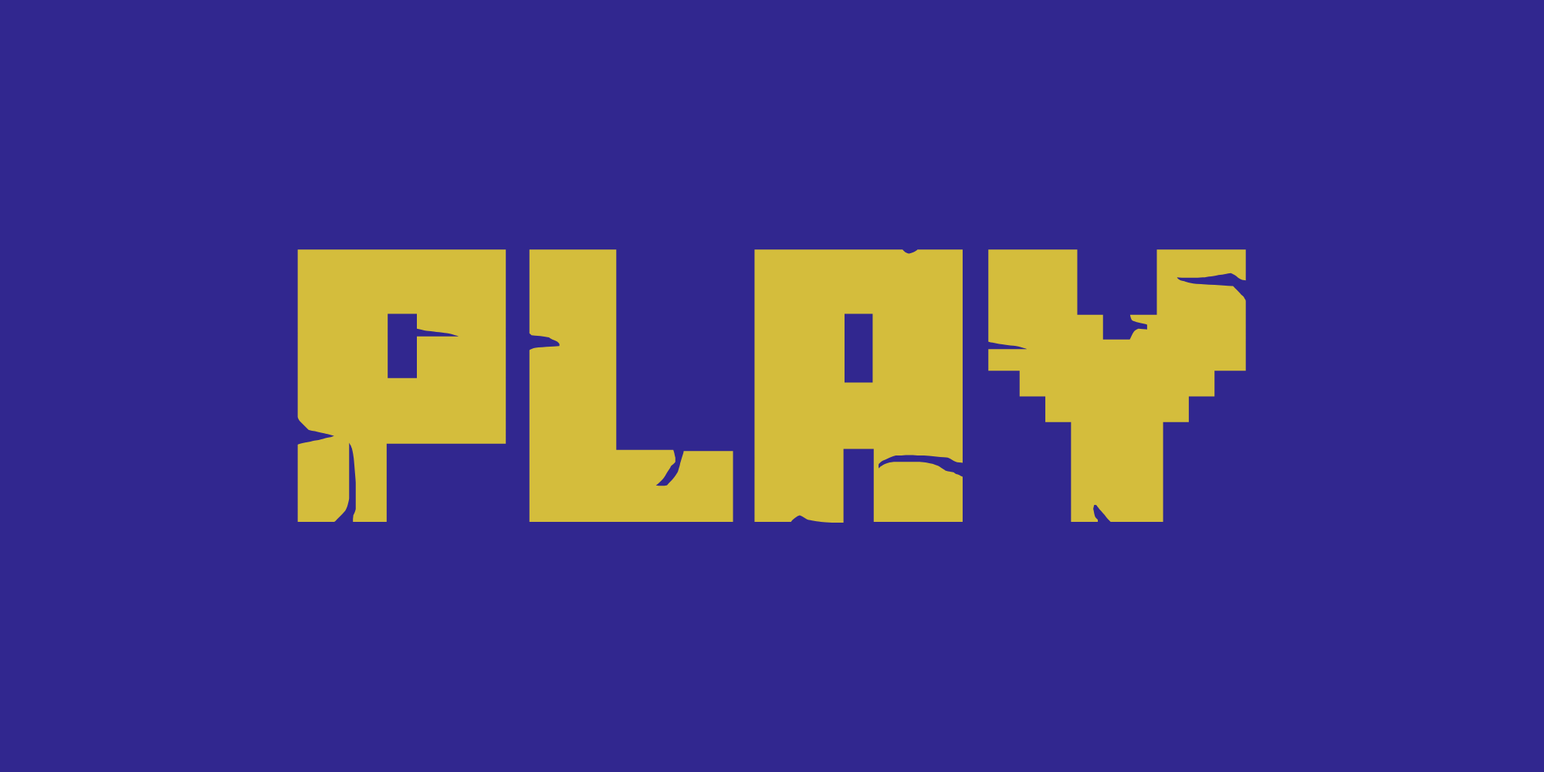
<style>
.page{position:relative;width:1544px;height:772px;background:#31278f}
.page>*{position:absolute;margin:0}
.t1{font:347.5px "MinecrafterAlt";color:#d4bd3c}
</style>
<div class="page">
<p class="t1" style="left:297px;top:249px;width:949px;height:274px">PLAY</p>
</div>
